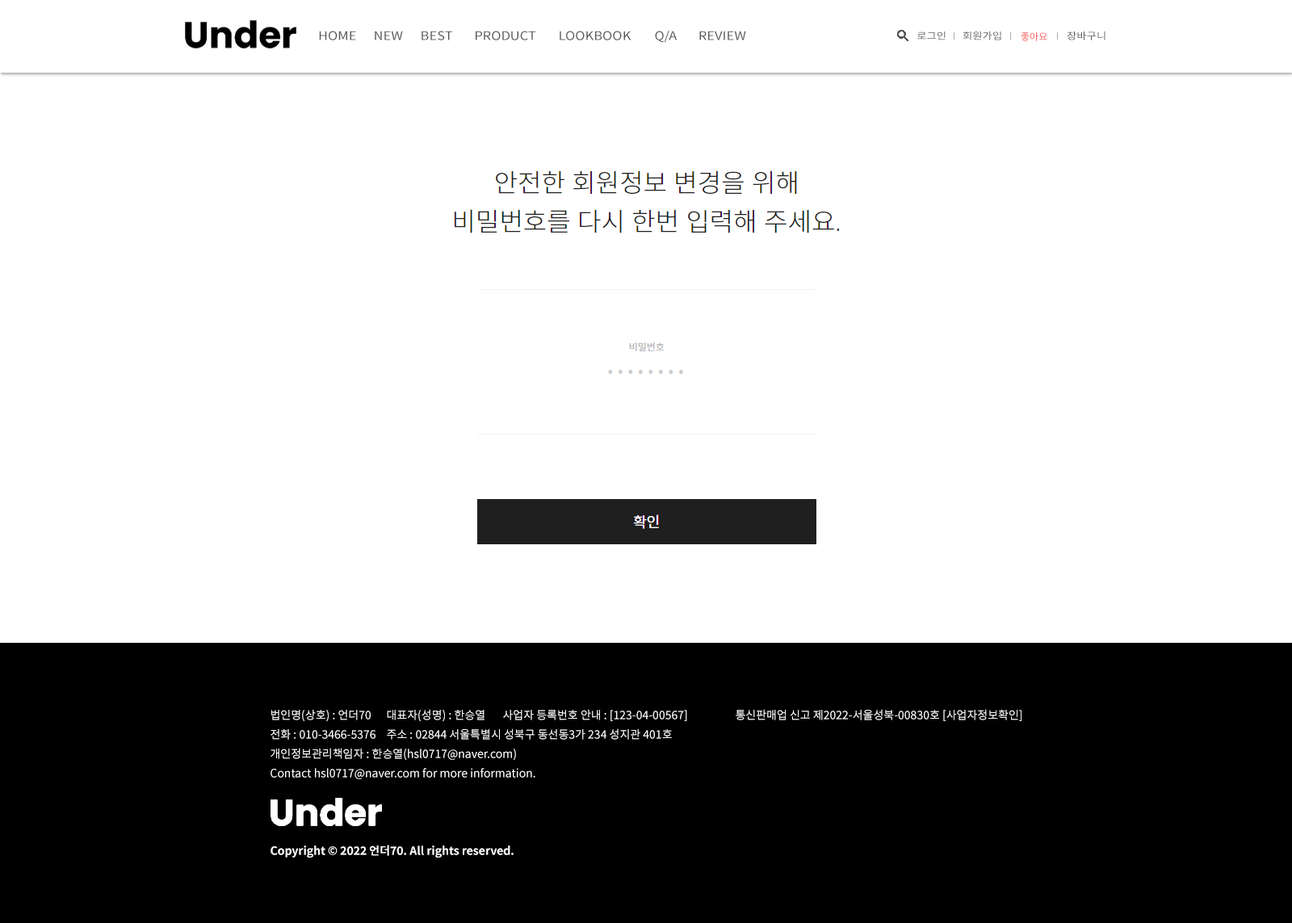
<style>
.page{position:relative;width:1292px;height:923px;background:#ffffff}
.page>*{position:absolute;margin:0}
.t1{font:11.7px "NotoSansKR-Regular";color:#555555;scale:1.14 1}
.t2{font:9.7px "NotoSansKR-Regular";color:#555555;scale:1.11 1}
.t3{font:9.7px "NotoSansKR-Regular";color:#f85656}
.t4{font:11.3px/19.4px "NotoSansKR-Regular";color:#ffffff}
.t5{font:11.3px/19.4px "NotoSansKR-Bold";color:#ffffff}
</style>
<div class="page">
<p class="t1" style="left:319px;top:31px;width:37px;height:9px">HOME</p>
<p class="t1" style="left:375px;top:31px;width:28px;height:9px">NEW</p>
<p class="t1" style="left:422px;top:31px;width:31px;height:9px">BEST</p>
<p class="t1" style="left:476px;top:31px;width:60px;height:9px">PRODUCT</p>
<p class="t1" style="left:560px;top:31px;width:71px;height:9px">LOOKBOOK</p>
<p class="t1" style="left:655px;top:31px;width:22px;height:12px">Q/A</p>
<p class="t1" style="left:699px;top:31px;width:47px;height:9px">REVIEW</p>
<p class="t2" style="left:917px;top:31px;width:29px;height:9px">로그인</p>
<p class="t2" style="left:963px;top:31px;width:38px;height:9px">회원가입</p>
<p class="t3" style="left:1021px;top:32px;width:26px;height:9px">좋아요</p>
<p class="t2" style="left:1067px;top:31px;width:38px;height:9px">장바구니</p>
<p class="t4" style="left:271px;top:709px;width:750px;height:149px">법인명(상호) : 언더70 대표자(성명) : 한승열 사업자 등록번호 안내 : [123-04-00567]  통신판매업 신고 제2022-서울성북-00830호 [사업자정보확인]<br>전화 : 010-3466-5376 주소 : 02844 서울특별시 성북구 동선동3가 234 성지관 401호<br>개인정보관리책임자 : 한승열(hsl0717@naver.com)<br>Contact hsl0717@naver.com for more information.<br><span class="t5"><br><br><br>Copyright © 2022 언더70. All rights reserved.</span></p>
</div>
